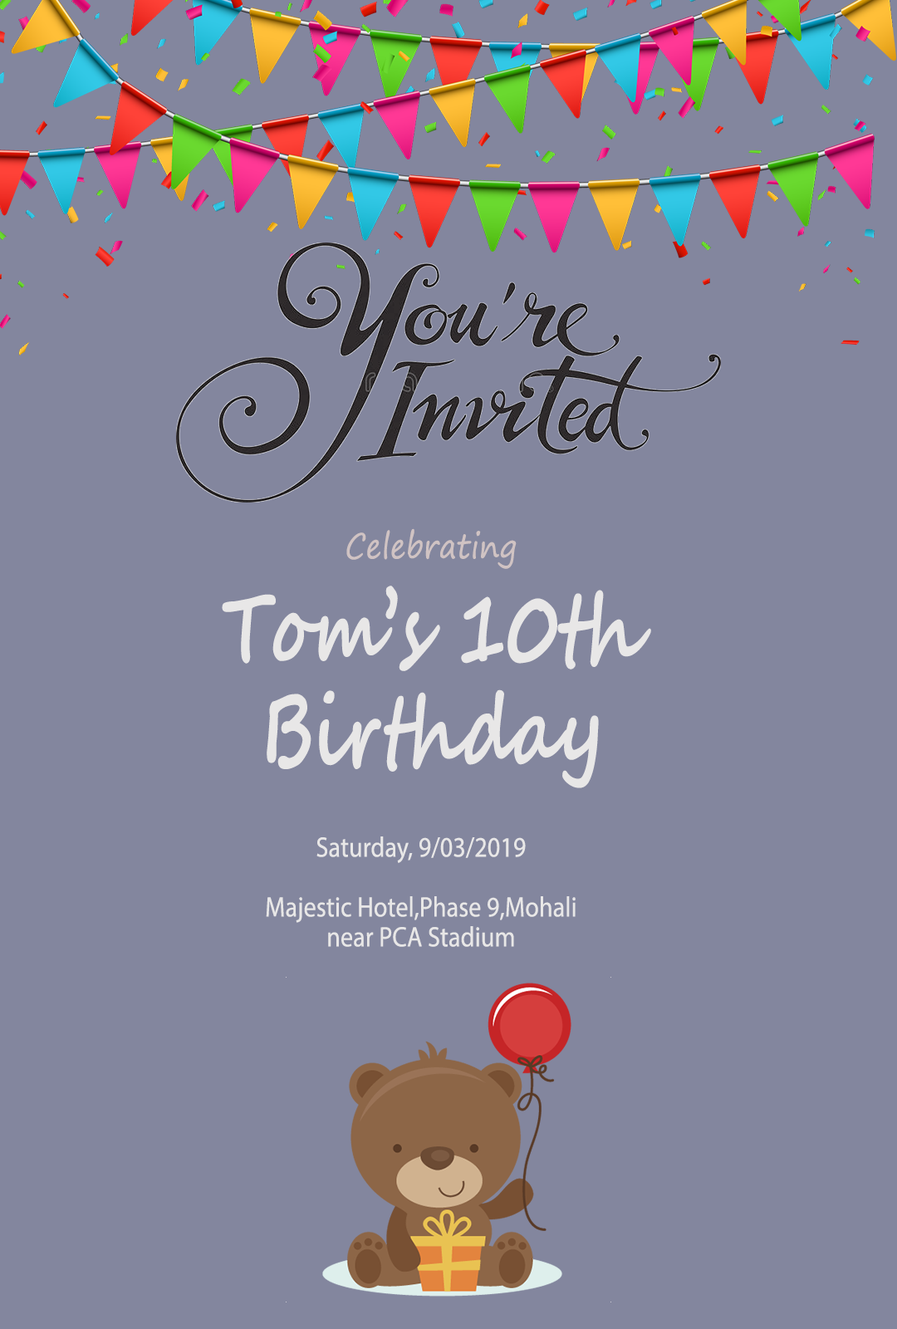
<style>
.page{position:relative;width:897px;height:1329px;background:#83869e}
.page>*{position:absolute;margin:0}
.t1{font:33.8px "SegoePrint";letter-spacing:0.005em;color:#cfc3c3;scale:0.88 1}
.t2{font:96.4px "SegoeScript-Bold";letter-spacing:0.005em;color:#e8e7e7;scale:0.72 1}
.t3{font:28.2px "MyriadPro-Regular";letter-spacing:0.005em;color:#e8e7e7;scale:0.88 1}
</style>
<div class="page">
<p class="t1" style="left:346px;top:528px;width:171px;height:41px">Celebrating</p>
<p class="t2" style="left:222px;top:586px;width:429px;height:202px;text-align:center">Tom’s 10th <br>Birthday</p>
<p class="t3" style="left:266px;top:837px;width:310px;height:110px;text-align:center">Saturday, 9/03/2019<br><br>Majestic Hotel,Phase 9,Mohali<br>near PCA Stadium</p>
</div>
